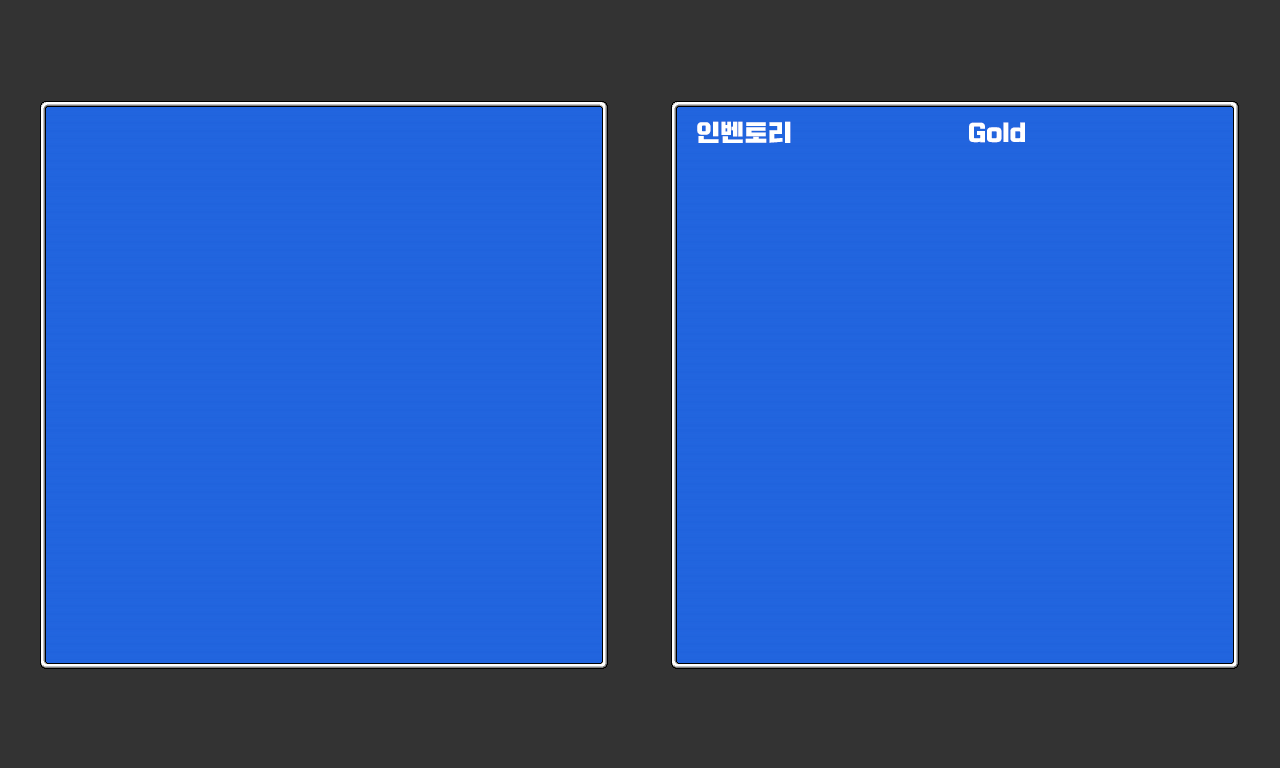
<style>
.page{position:relative;width:1280px;height:768px;background:#333333}
.page>*{position:absolute;margin:0}
.t1{font:24px "Typo_SsangmunDong_B";color:#ffffff}
</style>
<div class="page">
<p class="t1" style="left:697px;top:121px;width:94px;height:22px">인벤토리</p>
<p class="t1" style="left:969px;top:122px;width:56px;height:21px">Gold</p>
</div>
